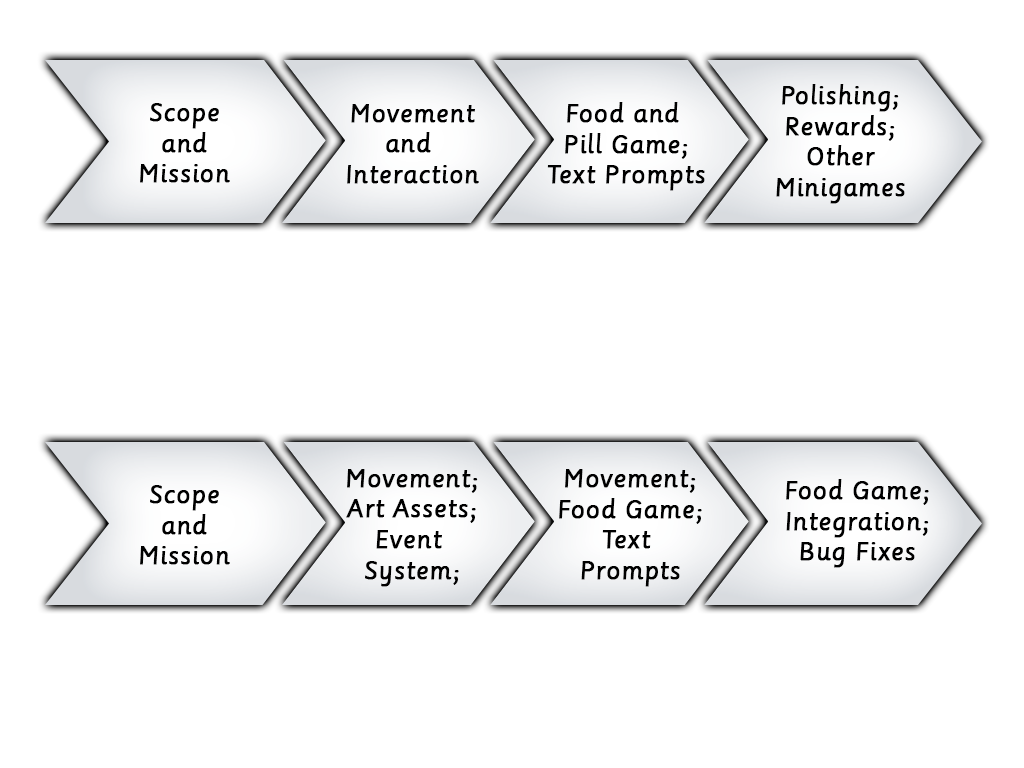
<style>
.page{position:relative;width:1024px;height:768px;background:#ffffff}
.page>*{position:absolute;margin:0}
.t1{font:25.5px "Sassoon-Primary";color:#000000;font-weight:bold}
</style>
<div class="page">
<p class="t1" style="left:776px;top:84px;width:129px;height:120px;text-align:center">Polishing;<br>Rewards;<br>Other<br>Minigames</p>
<p class="t1" style="left:547px;top:102px;width:158px;height:89px;text-align:center">Food and <br>Pill Game;<br>Text Prompts</p>
<p class="t1" style="left:140px;top:103px;width:90px;height:80px;text-align:center">Scope<br>and<br>Mission</p>
<p class="t1" style="left:347px;top:104px;width:132px;height:80px;text-align:center">Movement<br>and <br>Interaction</p>
<p class="t1" style="left:346px;top:469px;width:132px;height:118px;text-align:center">Movement;<br>Art Assets;<br>Event <br>System;</p>
<p class="t1" style="left:559px;top:469px;width:143px;height:118px;text-align:center">Movement;<br>Food Game;<br>Text <br>Prompts</p>
<p class="t1" style="left:140px;top:485px;width:90px;height:80px;text-align:center">Scope<br>and<br>Mission</p>
<p class="t1" style="left:786px;top:479px;width:143px;height:89px;text-align:center">Food Game;<br>Integration;<br>Bug Fixes</p>
</div>
